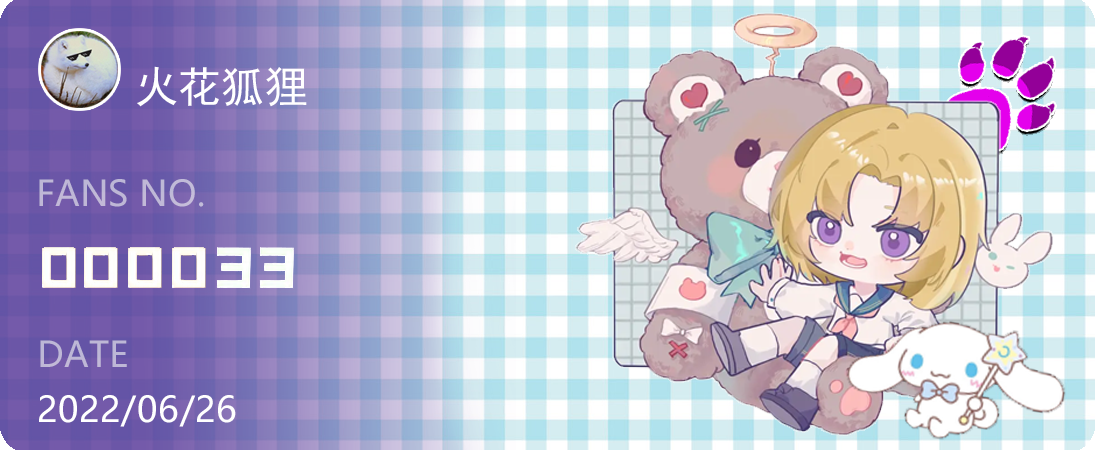
<style>
.page{position:relative;width:1095px;height:450px}
.page>*{position:absolute;margin:0}
.t1{font:43px "SimHei";letter-spacing:0.005em;color:#ffffff}
.t2{font:35px "MicrosoftYaHeiUI";letter-spacing:0.005em;color:#bfb8d6}
.t3{font:35px "MicrosoftYaHeiUI";letter-spacing:0.005em;color:#beb7d6}
.t4{font:35px "MicrosoftYaHeiUI";letter-spacing:0.02em;color:#ffffff}
</style>
<div class="page">
<p class="t1" style="left:137px;top:66px;width:170px;height:41px">火花狐狸</p>
<p class="t2" style="left:39px;top:179px;width:165px;height:28px">FANS NO.</p>
<p class="t3" style="left:40px;top:340px;width:87px;height:27px">DATE</p>
<p class="t4" style="left:39px;top:395px;width:197px;height:32px">2022/06/26</p>
</div>
